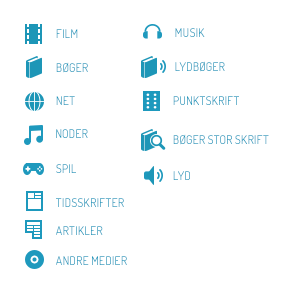
<style>
.page{position:relative;width:300px;height:300px;background:#ffffff}
.page>*{position:absolute;margin:0}
.t1{font:12px "Dosis-Regular";color:#1e99bd;text-transform:uppercase}
.t2{font:12px "Dosis-Regular";text-transform:uppercase}
</style>
<div class="page">
<p class="t1" style="left:56px;top:29px;width:22px;height:9px">FILM</p>
<p class="t2" style="left:175px;top:28px;width:30px;height:9px">MUSIK</p>
<p class="t1" style="left:56px;top:62px;width:32px;height:11px">BØGER</p>
<p class="t2" style="left:175px;top:61px;width:50px;height:11px">LYDBØGER</p>
<p class="t1" style="left:56px;top:96px;width:19px;height:9px">NET</p>
<p class="t1" style="left:173px;top:96px;width:66px;height:9px">PUNKTSKRIFT</p>
<p class="t1" style="left:56px;top:129px;width:32px;height:9px">NODER</p>
<p class="t1" style="left:173px;top:134px;width:96px;height:11px">BØGER STOR SKRIFT</p>
<p class="t2" style="left:56px;top:164px;width:20px;height:9px">SPIL</p>
<p class="t2" style="left:173px;top:171px;width:17px;height:9px">LYD</p>
<p class="t2" style="left:56px;top:198px;width:68px;height:9px">TIDSSKRIFTER</p>
<p class="t2" style="left:56px;top:226px;width:47px;height:9px">ARTIKLER</p>
<p class="t1" style="left:56px;top:256px;width:71px;height:9px">ANDRE MEDIER</p>
</div>
